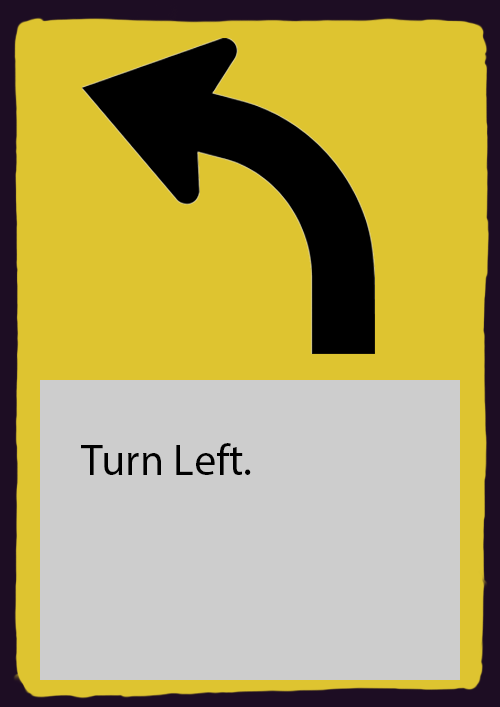
<style>
.page{position:relative;width:500px;height:707px;background:#dec430}
.page>*{position:absolute;margin:0}
.t1{font:44px "MyriadPro-Regular";color:#000000}
</style>
<div class="page">
<p class="t1" style="left:81px;top:443px;width:170px;height:32px">Turn Left.</p>
</div>
